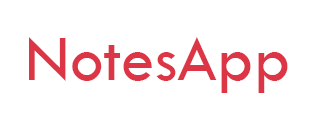
<style>
.page{position:relative;width:315px;height:126px;background:#ffffff}
.page>*{position:absolute;margin:0}
.t1{font:66.7px "TwCenMT-Regular";color:#dc3545}
</style>
<div class="page">
<p class="t1" style="left:29px;top:37px;width:259px;height:56px">NotesApp</p>
</div>
